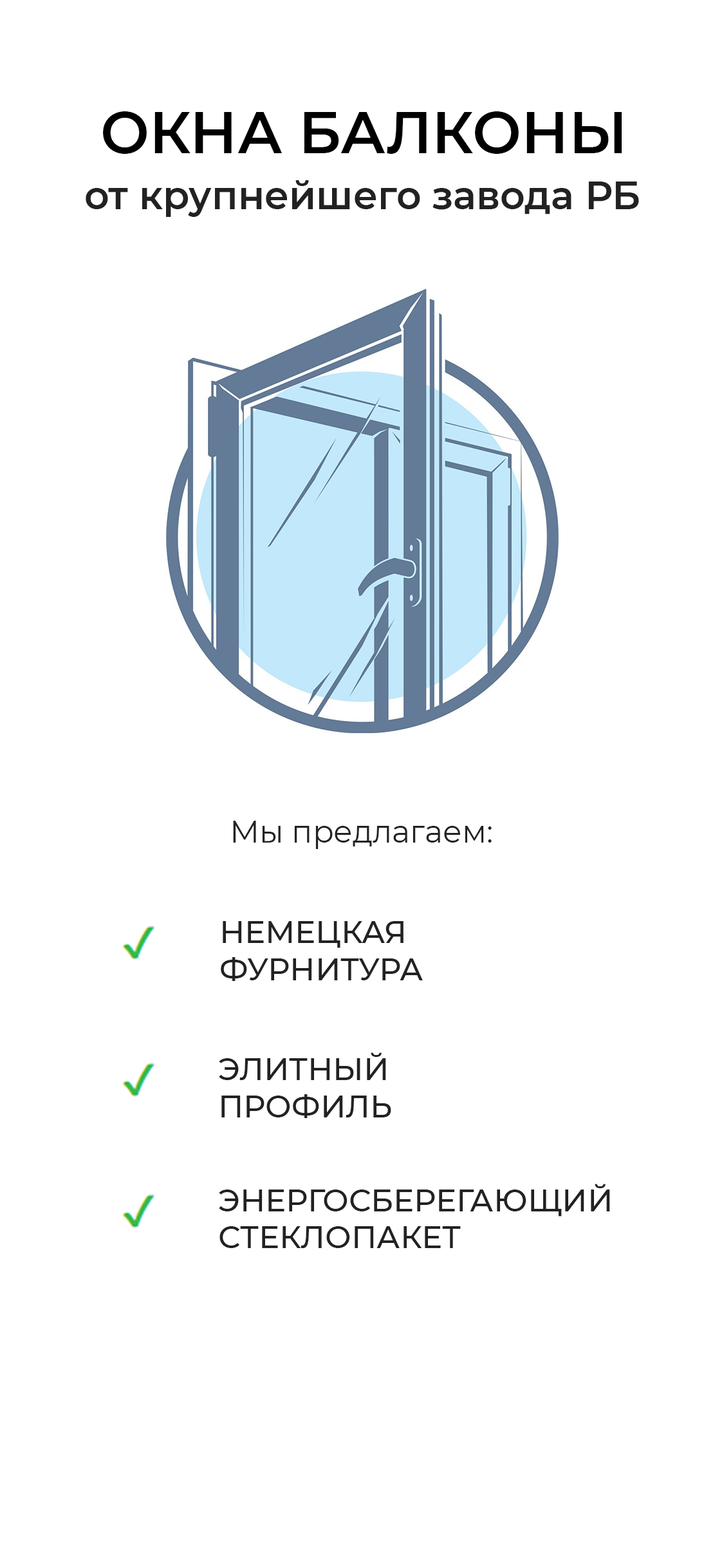
<style>
.page{position:relative;width:724px;height:1568px;background:#ffffff}
.page>*{position:absolute;margin:0}
.t1{font:57.9px "Montserrat-SemiBold";color:#000000;text-transform:uppercase}
.t2{font:38.6px "Montserrat-SemiBold";color:#222222}
.t3{font:30.9px "Montserrat-Regular";color:#222222}
.t4{font:30.9px "Montserrat-Medium";color:#222222}
</style>
<div class="page">
<p class="t1" style="left:103px;top:111px;width:519px;height:43px">ОКНА БАЛКОНЫ</p>
<p class="t2" style="left:86px;top:180px;width:553px;height:37px">от крупнейшего завода РБ</p>
<p class="t3" style="left:233px;top:821px;width:259px;height:28px">Мы предлагаем:</p>
<p class="t4" style="left:221px;top:921px;width:202px;height:60px">НЕМЕЦКАЯ<br>ФУРНИТУРА</p>
<p class="t4" style="left:219px;top:1052px;width:172px;height:66px">ЭЛИТНЫЙ<br>ПРОФИЛЬ</p>
<p class="t4" style="left:219px;top:1184px;width:391px;height:64px">ЭНЕРГОСБЕРЕГАЮЩИЙ СТЕКЛОПАКЕТ</p>
</div>
